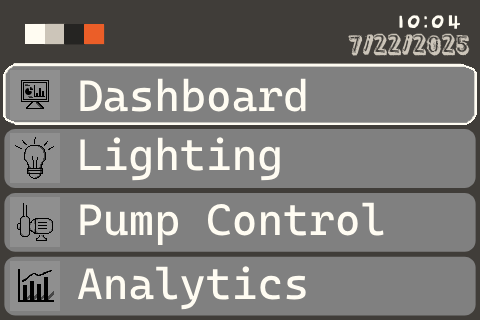
<style>
.page{position:relative;width:480px;height:320px;background:#808080}
.page>*{position:absolute;margin:0}
.t1{font:27.7px "Dokdo-Regular";color:#fffcf2;scale:0.96 1}
.t2{font:24px "District";color:#ccc5b9}
.t3{font:44px "CascadiaCode";color:#fffcf2}
</style>
<div class="page">
<p class="t1" style="left:399px;top:15px;width:61px;height:14px">10:04</p>
<p class="t2" style="left:348px;top:33px;width:122px;height:23px">7/22/2025</p>
<p class="t3" style="left:80px;top:78px;width:226px;height:34px">Dashboard</p>
<p class="t3" style="left:80px;top:137px;width:200px;height:44px">Lighting</p>
<p class="t3" style="left:80px;top:202px;width:304px;height:43px">Pump Control</p>
<p class="t3" style="left:77px;top:266px;width:229px;height:44px">Analytics</p>
</div>
